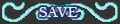
<style>
.page{position:relative;width:120px;height:24px;background:#333333}
.page>*{position:absolute;margin:0}
.t1{font:16px "BellMT";color:#e0e0f0}
</style>
<div class="page">
<p class="t1" style="left:39px;top:7px;width:39px;height:10px">SAVE</p>
</div>
